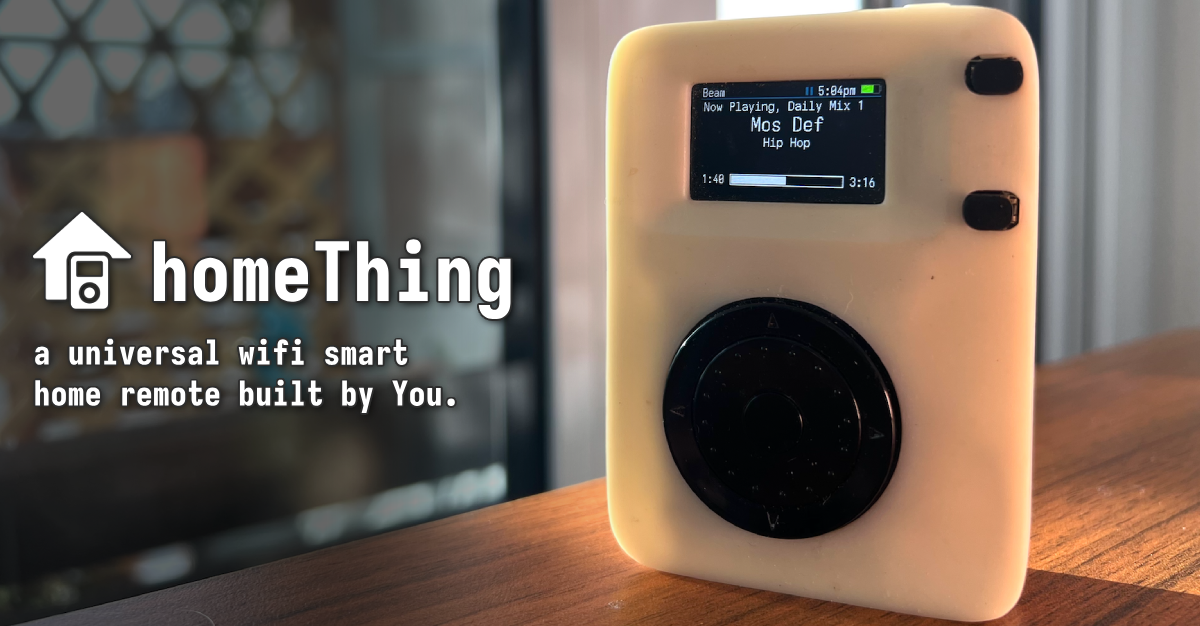
<style>
.page{position:relative;width:1200px;height:626px}
.page>*{position:absolute;margin:0}
.t1{font:81.3px "Iosevka-Heavy";color:#ffffff}
.t2{font:34.1px "Iosevka-Heavy";color:#ffffff}
</style>
<div class="page">
<p class="t1" style="left:153px;top:239px;width:358px;height:81px">homeThing</p>
<p class="t2" style="left:35px;top:338px;width:420px;height:75px">a universal wifi smart home remote built by You.</p>
</div>
